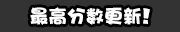
<style>
.page{position:relative;width:180px;height:32px;background:#333333}
.page>*{position:absolute;margin:0}
.t1{font:18.7px "DFPHaiBaoW12";color:#ffffff}
.t2{font:18.7px "DFPHaiBaoW12";letter-spacing:0.05em;color:#ffffff}
.t3{font:18.7px "MARIOFontv3_1-Solid";color:#ffffff}
</style>
<div class="page">
<p class="t1" style="left:30px;top:7px;width:120px;height:18px">最高分数更<span class="t2">新</span><span class="t3">！</span></p>
</div>
